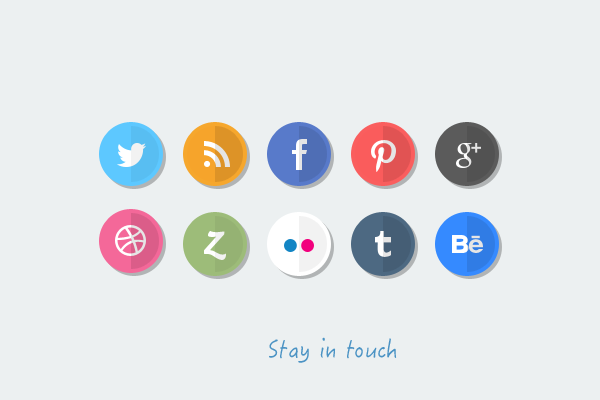
<style>
.page{position:relative;width:600px;height:400px;background:#ecf0f1}
.page>*{position:absolute;margin:0}
.t1{font:25px "HanziPenTC-W3";color:#4b93c4}
</style>
<div class="page">
<p class="t1" style="left:269px;top:337px;width:128px;height:26px">Stay in touch</p>
</div>
